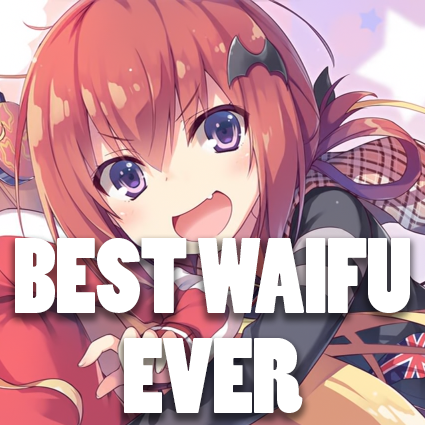
<style>
.page{position:relative;width:425px;height:425px}
.page>*{position:absolute;margin:0}
.t1{font:100px/100px "PoplarStd";color:#ffffff}
</style>
<div class="page">
<p class="t1" style="left:15px;top:238px;width:395px;height:175px;text-align:center">BEST WAIFU<br>EVER</p>
</div>
